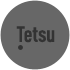
<style>
.page{position:relative;width:70px;height:70px;background:#676767}
.page>*{position:absolute;margin:0}
.t1{font:22px "DINCond-Bold";letter-spacing:-0.01em;color:#333333}
</style>
<div class="page">
<p class="t1" style="left:16px;top:26px;width:39px;height:17px">Tetsu</p>
</div>
